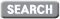
<style>
.page{position:relative;width:60px;height:19px;background:#919296}
.page>*{position:absolute;margin:0}
.t1{font:10px "HeadlineR-HM";letter-spacing:-0.02em;color:#f9fafc}
</style>
<div class="page">
<p class="t1" style="left:7px;top:4px;width:46px;height:10px">SEARCH</p>
</div>
